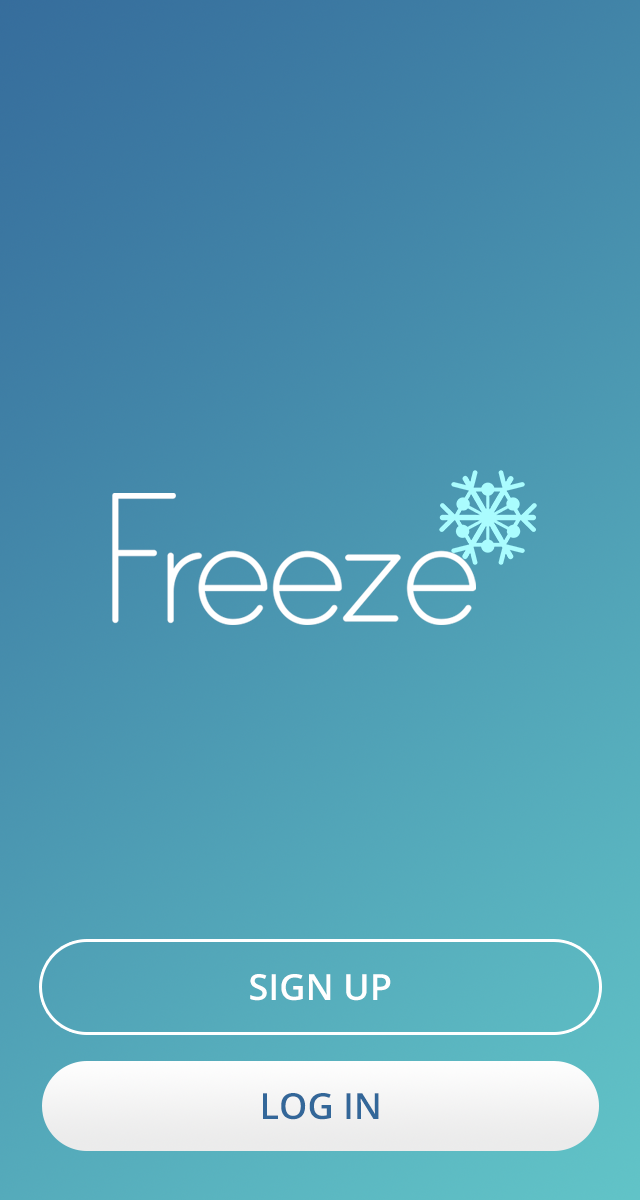
<style>
.page{position:relative;width:640px;height:1200px}
.page>*{position:absolute;margin:0}
.t1{font:212.3px "PrintClearly";letter-spacing:-0.1em;color:#ffffff}
.t2{font:36px "OpenSans-Semibold";color:#ffffff}
.t3{font:36px "OpenSans-Semibold";color:#336799}
</style>
<div class="page">
<p class="t1" style="left:112px;top:493px;width:364px;height:132px">Freeze</p>
<p class="t2" style="left:250px;top:974px;width:141px;height:27px">SIGN UP</p>
<p class="t3" style="left:263px;top:1093px;width:116px;height:27px">LOG IN</p>
</div>
